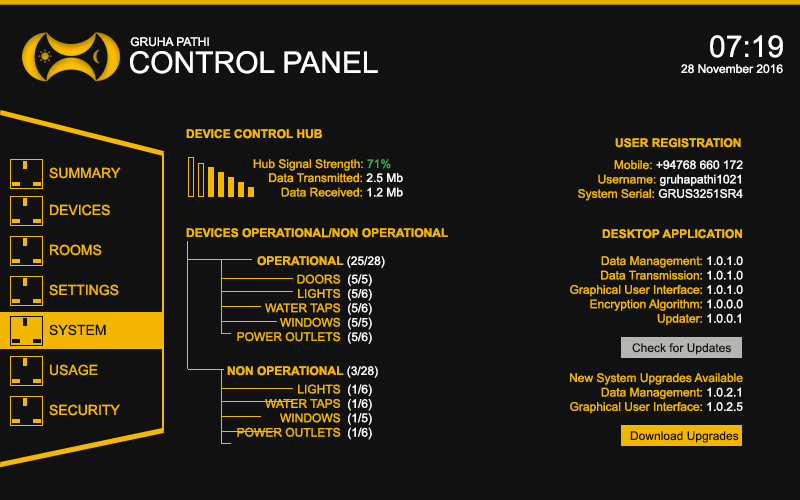
<style>
.page{position:relative;width:800px;height:500px;background:#111111}
.page>*{position:absolute;margin:0}
.t1{font:12px "ArialMT";color:#ffffff}
.t2{font:30px "ArialMT";color:#ffffff}
.t3{font:12px "Arial-BoldMT";color:#f5b800}
.t4{font:12px "Arial-BoldMT";color:#f2b600}
.t5{font:12px "ArialMT";color:#f2b600}
.t6{font:12px "ArialMT";color:#39b54a}
.t7{font:12px "ArialMT";color:#fbfaf8}
.t8{font:12px "ArialMT";color:#f5b800}
.t9{font:14px "ArialMT";color:#f2b600}
.t10{font:14px "ArialMT";color:#f5b800}
.t11{font:14px "ArialMT";color:#111111}
.t12{font:12px "ArialMT";color:#111111}
</style>
<div class="page">
<p class="t1" style="left:130px;top:37px;width:79px;height:10px">GRUHA PATHI</p>
<p class="t2" style="left:710px;top:35px;width:73px;height:23px">07:19</p>
<p class="t2" style="left:130px;top:51px;width:248px;height:23px">CONTROL PANEL</p>
<p class="t1" style="left:681px;top:64px;width:102px;height:10px">28 November 2016</p>
<p class="t3" style="left:186px;top:129px;width:136px;height:10px">DEVICE CONTROL HUB</p>
<p class="t4" style="left:615px;top:138px;width:126px;height:10px">USER REGISTRATION</p>
<p class="t5" style="left:253px;top:159px;width:138px;height:12px">Hub Signal Strength: <span class="t6">71%</span></p>
<p class="t7" style="left:578px;top:160px;width:165px;height:41px;text-align:right"><span class="t8">Mobile: </span>+94768 660 172<br><span class="t8">Username: </span><span class="t1">gruhapathi1021<br></span><span class="t5">System Serial: </span>GRUS3251SR4</p>
<p class="t9" style="left:49px;top:167px;width:72px;height:12px">SUMMARY</p>
<p class="t8" style="left:269px;top:173px;width:134px;height:24px;text-align:right">Data Transmitted: <span class="t1">2.5 Mb<br></span>Data Received: <span class="t1">1.2 Mb</span></p>
<p class="t10" style="left:50px;top:204px;width:60px;height:12px">DEVICES</p>
<p class="t4" style="left:186px;top:228px;width:262px;height:10px">DEVICES OPERATIONAL/NON OPERATIONAL</p>
<p class="t4" style="left:602px;top:229px;width:140px;height:10px">DESKTOP APPLICATION</p>
<p class="t10" style="left:50px;top:244px;width:52px;height:12px">ROOMS</p>
<p class="t4" style="left:257px;top:256px;width:128px;height:12px">OPERATIONAL<span class="t1"> (25/28)</span></p>
<p class="t8" style="left:570px;top:256px;width:173px;height:69px;text-align:right">Data Management: <span class="t1">1.0.1.0<br></span>Data Transmission: <span class="t1">1.0.1.0<br></span>Graphical User Interface: <span class="t1">1.0.1.0<br></span>Encryption Algorithm: <span class="t1">1.0.0.0<br></span><span class="t5">Updater: </span><span class="t1">1.0.0.1</span></p>
<p class="t5" style="left:237px;top:274px;width:135px;height:70px;text-align:right"><span class="t4"><br></span>DOORS  <span class="t1">(5/5)<br></span>LIGHTS  <span class="t1">(5/6)<br></span>WATER TAPS  <span class="t1">(5/6)<br></span>WINDOWS  <span class="t1">(5/5)<br></span>POWER OUTLETS  <span class="t1">(5/6)</span></p>
<p class="t9" style="left:49px;top:284px;width:70px;height:12px">SETTINGS</p>
<p class="t11" style="left:49px;top:324px;width:57px;height:12px">SYSTEM</p>
<p class="t12" style="left:632px;top:343px;width:99px;height:12px">Check for Updates</p>
<p class="t9" style="left:50px;top:364px;width:48px;height:12px">USAGE</p>
<p class="t4" style="left:227px;top:366px;width:151px;height:12px">NON OPERATIONAL<span class="t1"> (3/28)</span></p>
<p class="t5" style="left:570px;top:373px;width:173px;height:41px;text-align:right">New System Upgrades Available<br><span class="t8">Data Management: </span><span class="t7">1.0.2.1<br></span>Graphical User Interface: <span class="t7">1.0.2.5</span></p>
<p class="t5" style="left:237px;top:384px;width:135px;height:56px;text-align:right"><span class="t4"><br></span>LIGHTS  <span class="t1">(1/6)<br></span>WATER TAPS  <span class="t1">(1/6)<br></span>WINDOWS  <span class="t1">(1/5)<br></span>POWER OUTLETS  <span class="t1">(1/6)</span></p>
<p class="t10" style="left:49px;top:404px;width:71px;height:12px">SECURITY</p>
<p class="t12" style="left:630px;top:431px;width:109px;height:12px">Download Upgrades</p>
</div>
